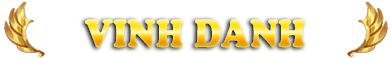
<style>
.page{position:relative;width:391px;height:58px;background:#ffffff}
.page>*{position:absolute;margin:0}
.t1{font:41.1px "UTM-Cooper-Black";scale:0.83 1}
</style>
<div class="page">
<p class="t1" style="left:85px;top:19px;width:220px;height:29px">VINH DANH</p>
</div>
